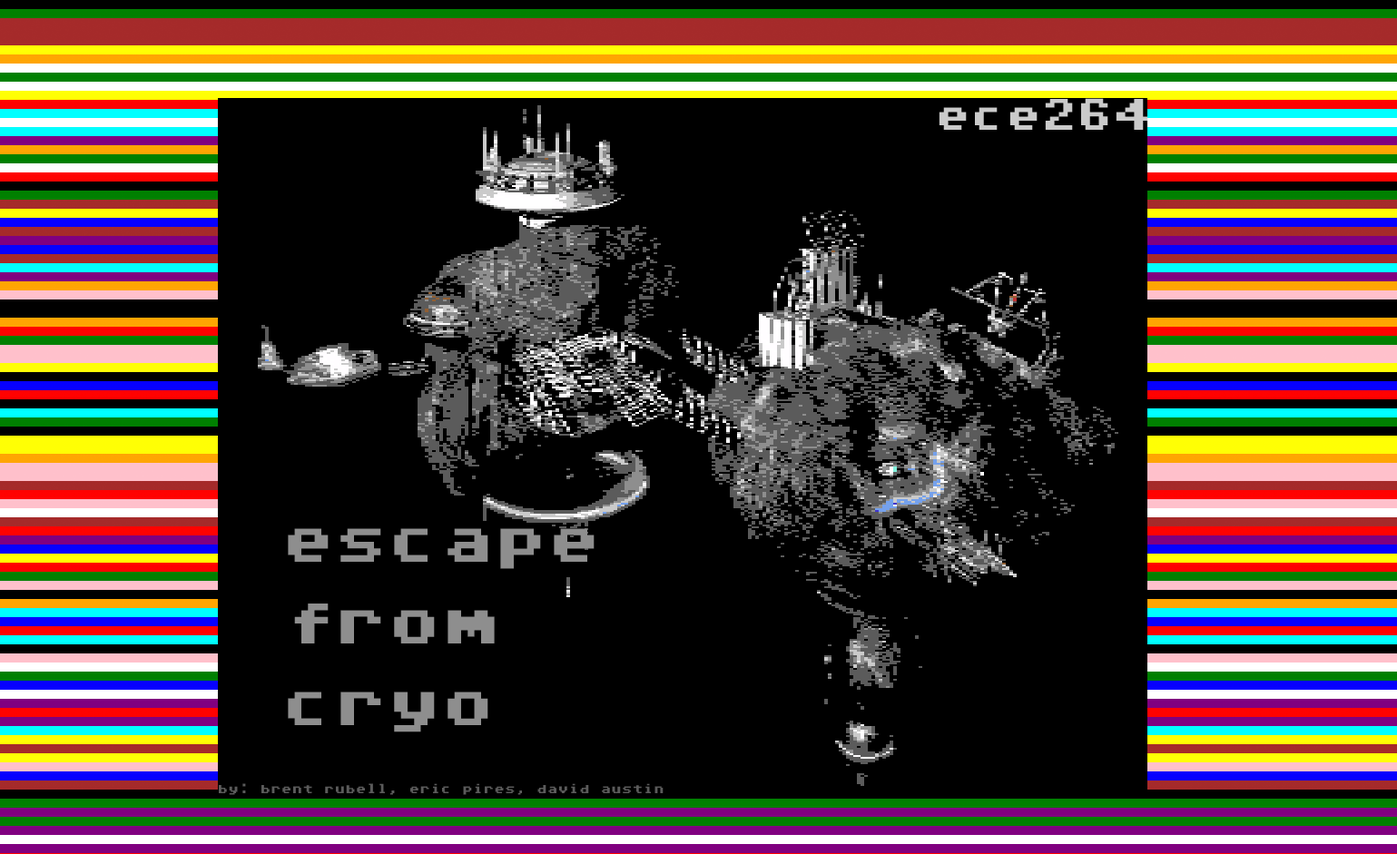
<style>
.page{position:relative;width:1397px;height:854px;background:#000000}
.page>*{position:absolute;margin:0}
.t1{font:45.4px "Commodore64";color:#cacaca}
.t2{font:68.1px "Commodore64";color:#8e8e8e}
.t3{font:13.6px "Commodore64";color:#5b5b5b}
</style>
<div class="page">
<p class="t1" style="left:938px;top:98px;width:210px;height:32px">ece264</p>
<p class="t2" style="left:288px;top:528px;width:306px;height:204px">escape<br>from<br>cryo</p>
<p class="t3" style="left:219px;top:783px;width:444px;height:12px">by: brent rubell, eric pires, david austin</p>
</div>
